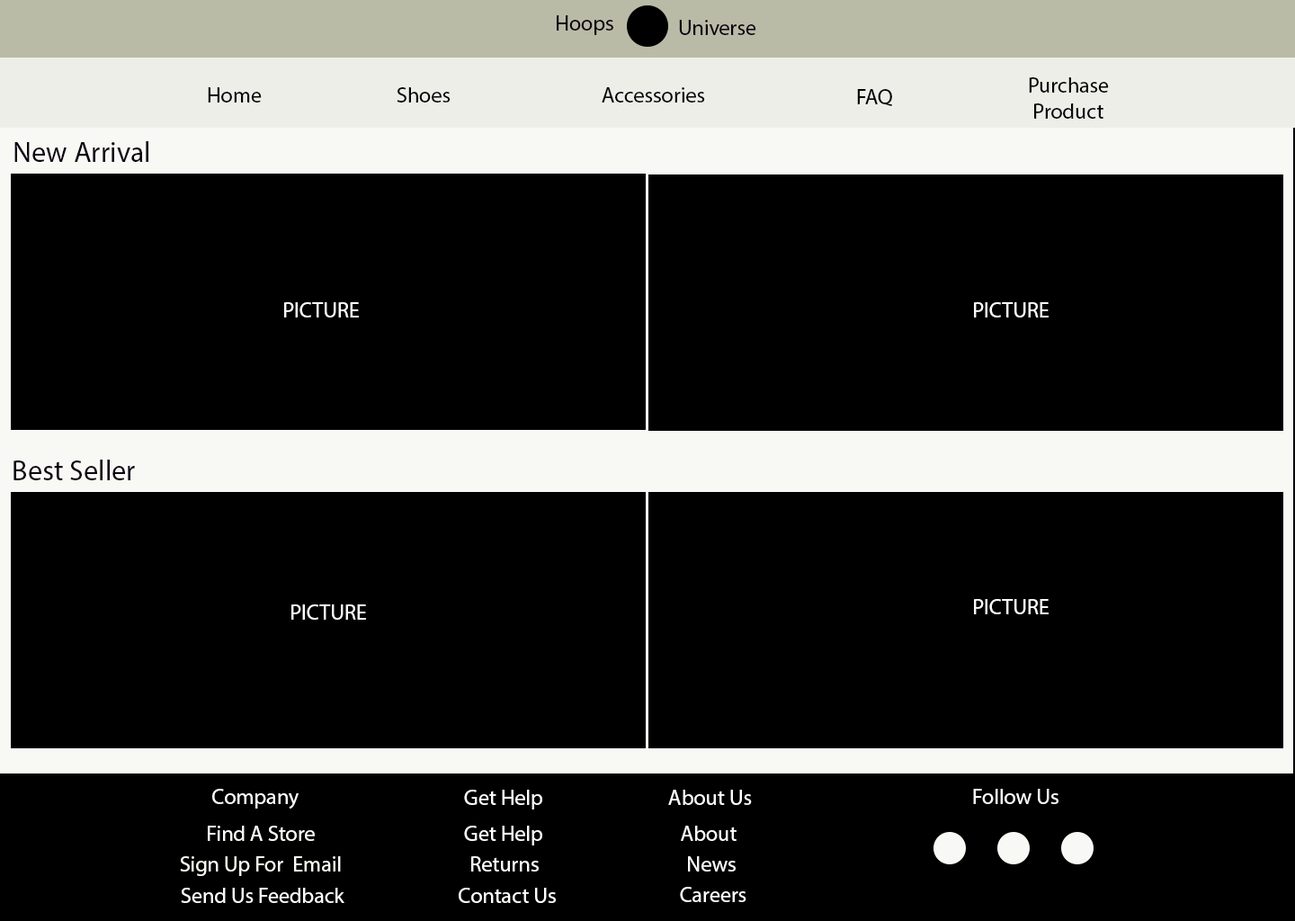
<style>
.page{position:relative;width:1295px;height:921px;background:#000000}
.page>*{position:absolute;margin:0}
.t1{font:21.6px "MyriadPro-Regular";color:#0c0111}
.t2{font:21.6px "MyriadPro-Regular";color:#060206}
.t3{font:28.8px "MyriadPro-Regular";color:#0c0111}
.t4{font:21.6px "MyriadPro-Regular";color:#ffffff}
.t5{font:21.6px "MyriadPro-Regular";color:#fefefe}
.t6{font:21.6px "MyriadPro-Regular";color:#fdfef8}
.t7{font:21.6px "MyriadPro-Regular";color:#fdfdfd}
.t8{font:21.6px "MyriadPro-Regular";color:#fbfcf2}
.t9{font:21.6px "MyriadPro-Regular";color:#fbfbfb}
.t10{font:21.6px "MyriadPro-Regular";color:#fcfcfc}
.t11{font:21.6px "MyriadPro-Regular";color:#fffffb}
</style>
<div class="page">
<p class="t1" style="left:557px;top:15px;width:56px;height:20px">Hoops</p>
<p class="t1" style="left:679px;top:20px;width:77px;height:15px">Universe</p>
<p class="t2" style="left:1029px;top:77px;width:80px;height:42px;text-align:center">Purchase<br>Product</p>
<p class="t2" style="left:208px;top:87px;width:54px;height:16px">Home</p>
<p class="t2" style="left:397px;top:87px;width:54px;height:16px">Shoes</p>
<p class="t2" style="left:602px;top:87px;width:103px;height:16px">Accessories</p>
<p class="t2" style="left:857px;top:89px;width:35px;height:17px">FAQ</p>
<p class="t3" style="left:14px;top:141px;width:134px;height:21px">New Arrival</p>
<p class="t4" style="left:284px;top:302px;width:75px;height:15px">PICTURE</p>
<p class="t4" style="left:974px;top:302px;width:75px;height:15px">PICTURE</p>
<p class="t3" style="left:13px;top:460px;width:122px;height:20px">Best Seller</p>
<p class="t4" style="left:291px;top:604px;width:75px;height:16px">PICTURE</p>
<p class="t4" style="left:974px;top:599px;width:75px;height:15px">PICTURE</p>
<p class="t4" style="left:212px;top:789px;width:87px;height:19px">Company</p>
<p class="t4" style="left:464px;top:790px;width:78px;height:19px">Get Help</p>
<p class="t5" style="left:668px;top:790px;width:84px;height:15px">About Us</p>
<p class="t4" style="left:973px;top:789px;width:85px;height:15px">Follow Us</p>
<p class="t6" style="left:208px;top:826px;width:107px;height:15px">Find A Store</p>
<p class="t5" style="left:464px;top:826px;width:78px;height:19px">Get Help</p>
<p class="t7" style="left:681px;top:826px;width:55px;height:15px">About</p>
<p class="t8" style="left:180px;top:856px;width:161px;height:20px">Sign Up For  Email</p>
<p class="t5" style="left:471px;top:856px;width:68px;height:15px">Returns</p>
<p class="t9" style="left:688px;top:856px;width:48px;height:15px">News</p>
<p class="t10" style="left:181px;top:888px;width:163px;height:15px">Send Us Feedback</p>
<p class="t11" style="left:459px;top:888px;width:97px;height:15px">Contact Us</p>
<p class="t4" style="left:680px;top:887px;width:66px;height:15px">Careers</p>
</div>
